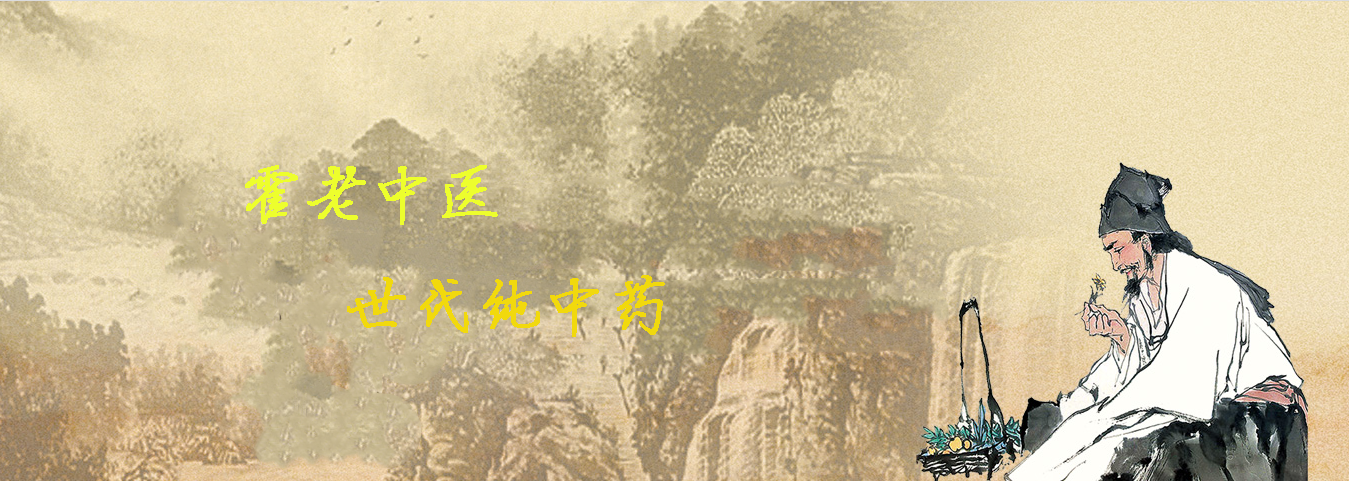
<style>
.page{position:relative;width:1349px;height:481px}
.page>*{position:absolute;margin:0}
.t1{font:64px "Jyinbixinsu";color:#f1d90d;font-weight:bold}
.t2{font:64px "Jyinbixinsu";color:#edfe2d;font-weight:bold}
</style>
<div class="page">
<p class="t1" style="left:245px;top:165px;width:420px;height:172px"><span class="t2">霍老中医<br>      </span>世代纯中药</p>
</div>
